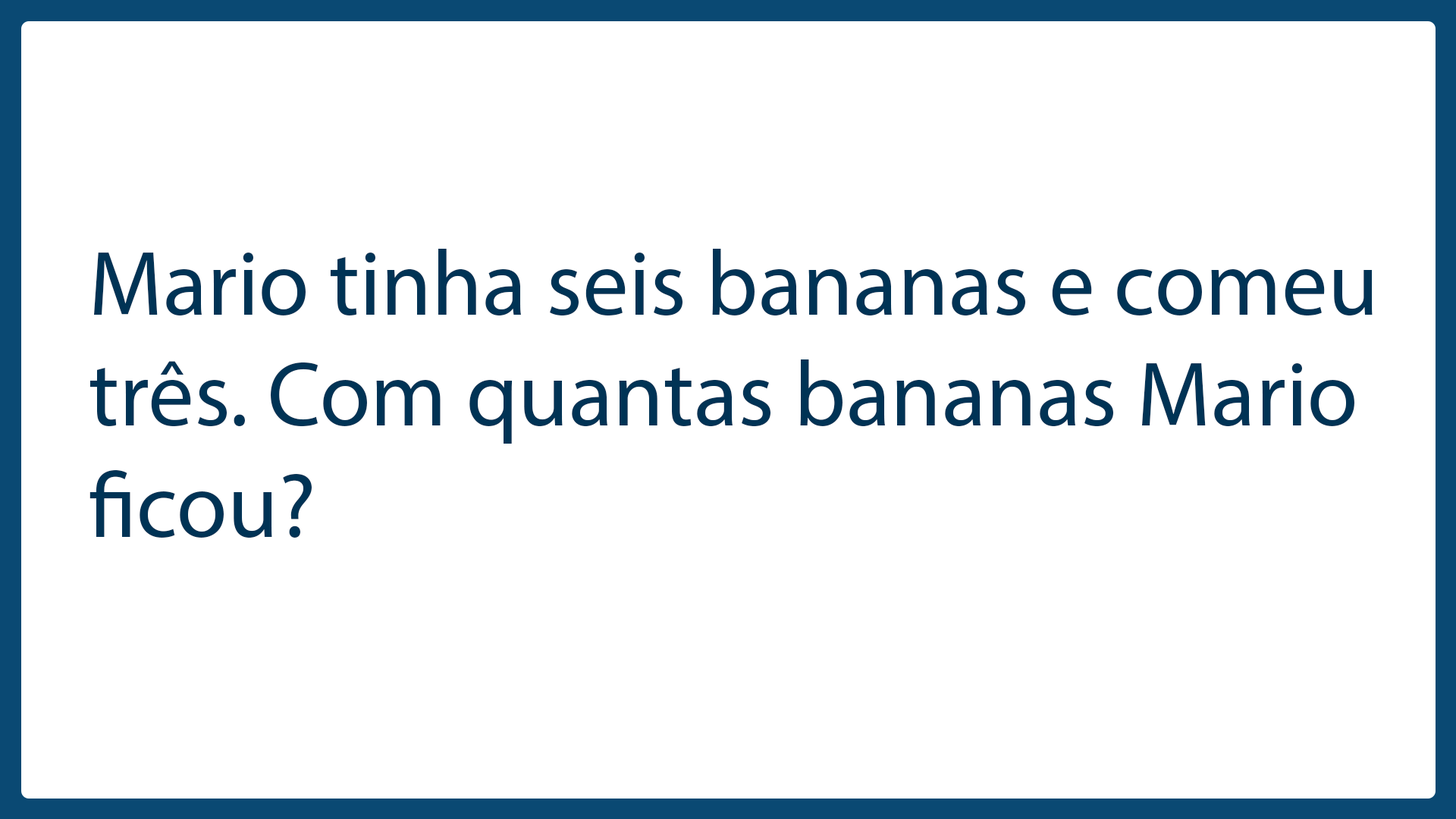
<style>
.page{position:relative;width:1456px;height:819px;background:#ffffff}
.page>*{position:absolute;margin:0}
.t1{font:92.6px "MyriadPro-Regular";color:#003355}
</style>
<div class="page">
<p class="t1" style="left:89px;top:249px;width:1284px;height:289px">Mario tinha seis bananas e comeu <br>três. Com quantas bananas Mario<br>ficou?</p>
</div>
